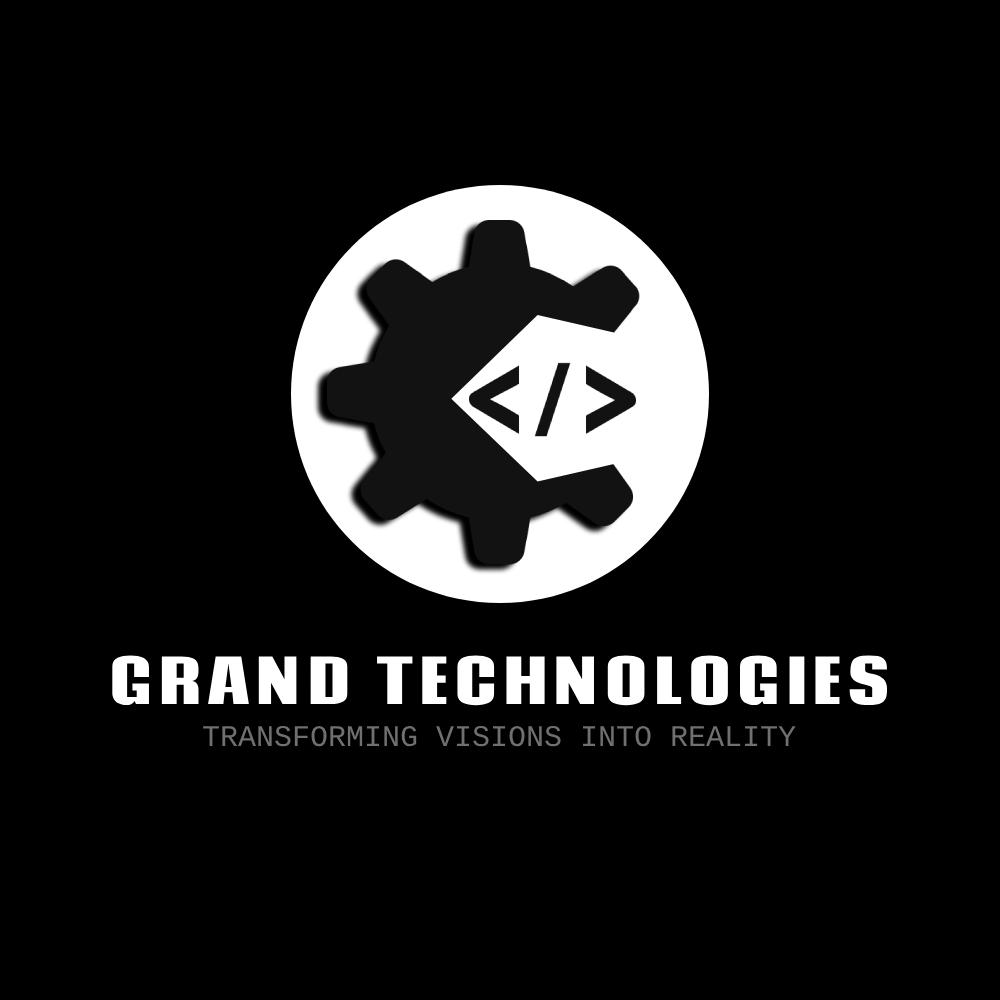
<style>
.page{position:relative;width:1000px;height:1000px;background:#000000}
.page>*{position:absolute;margin:0}
.t1{font:61px "CodaCaption-ExtraBold";color:#ffffff}
.t2{font:30px "Cousine-Regular";color:#707070}
</style>
<div class="page">
<p class="t1" style="left:112px;top:655px;width:776px;height:51px">GRAND TECHNOLOGIES</p>
<p class="t2" style="left:203px;top:725px;width:593px;height:22px">TRANSFORMING VISIONS INTO REALITY</p>
</div>
